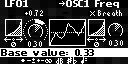
<style>
.page{position:relative;width:128px;height:64px;background:#000000}
.page>*{position:absolute;margin:0}
.t1{font:15px "MatchupPro";color:#ffffff}
.t2{font:15px "Eighties";color:#ffffff}
.t3{font:15px "MatchupPro";color:#000000}
</style>
<div class="page">
<p class="t1" style="left:5px;top:0px;width:23px;height:7px">LFO1</p>
<p class="t1" style="left:66px;top:0px;width:53px;height:8px">OSC1 Freq</p>
<p class="t2" style="left:25px;top:10px;width:18px;height:6px">+0.72</p>
<p class="t2" style="left:98px;top:10px;width:24px;height:6px">Breath</p>
<p class="t2" style="left:28px;top:41px;width:14px;height:6px">0.30</p>
<p class="t2" style="left:109px;top:40px;width:14px;height:6px">0.30</p>
<p class="t3" style="left:1px;top:49px;width:93px;height:7px">Base value: 0.33</p>
<p class="t1" style="left:21px;top:59px;width:10px;height:3px">+-</p>
</div>
